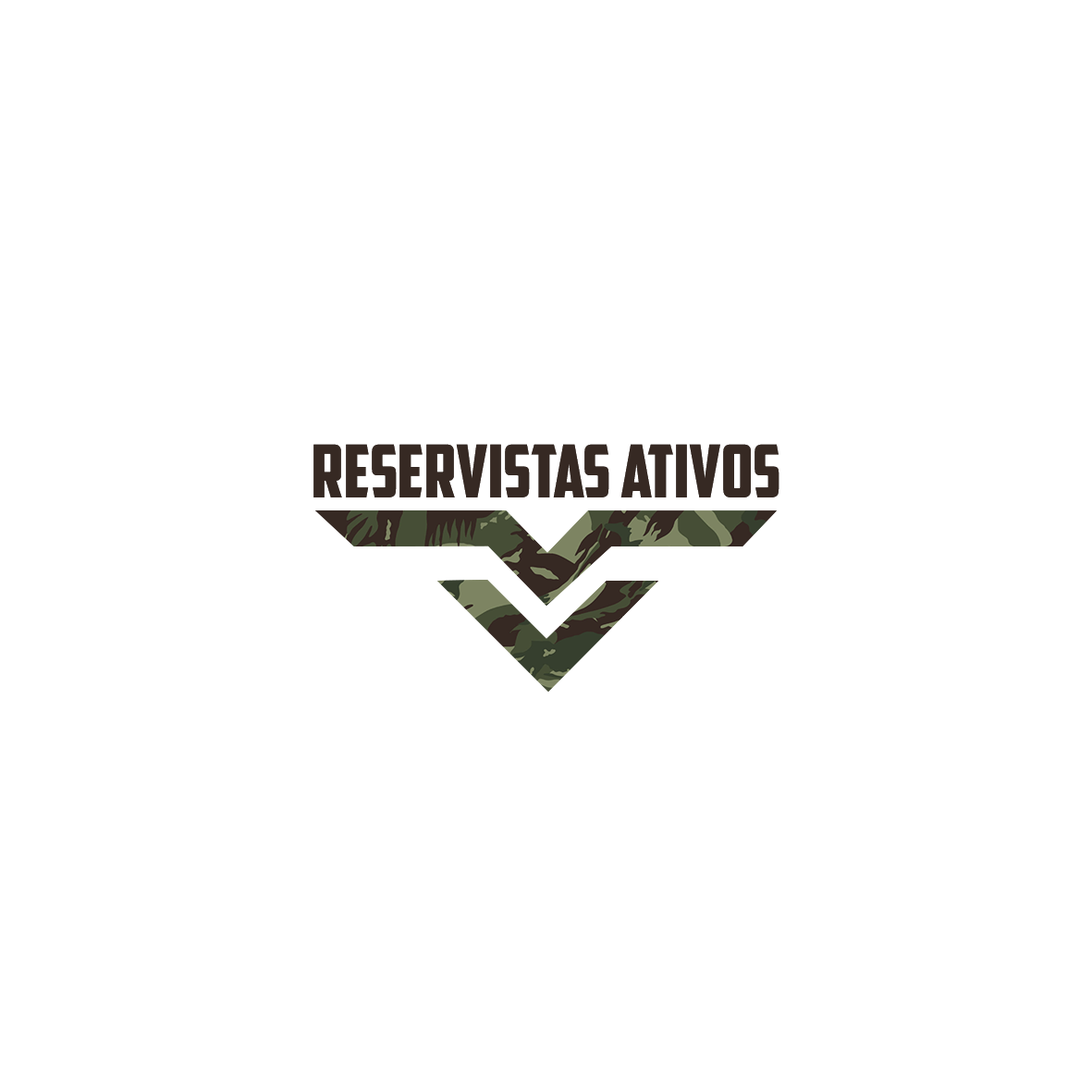
<style>
.page{position:relative;width:1092px;height:1092px;background:#ffffff}
.page>*{position:absolute;margin:0}
.t1{font:73.1px "AmericanCaptain";color:#362923}
</style>
<div class="page">
<p class="t1" style="left:313px;top:444px;width:466px;height:53px">RESERVISTAS ATIVOS</p>
</div>
